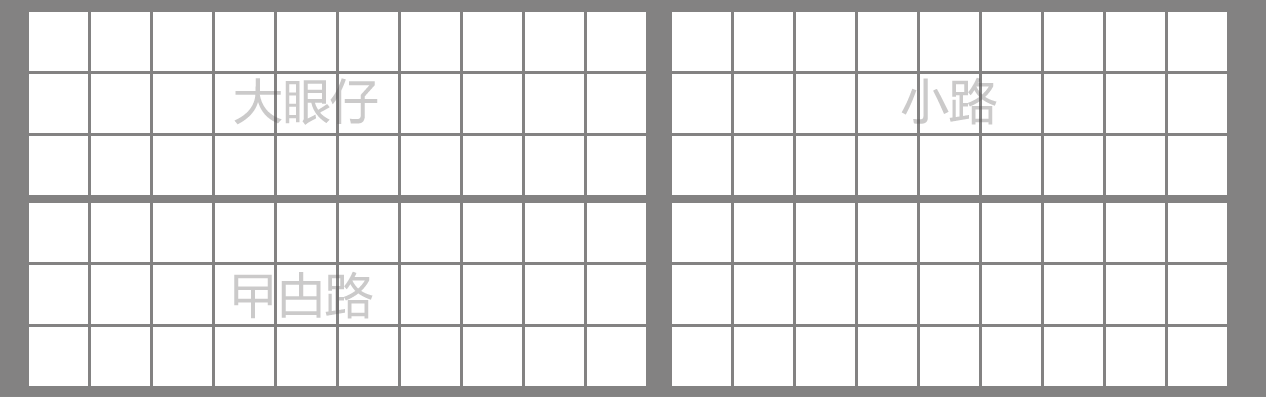
<style>
.page{position:relative;width:1266px;height:397px;background:#ffffff}
.page>*{position:absolute;margin:0}
.t1{font:48px "MicrosoftYaHei";color:#cbcaca}
</style>
<div class="page">
<p class="t1" style="left:234px;top:78px;width:144px;height:47px">大眼仔</p>
<p class="t1" style="left:901px;top:77px;width:96px;height:48px">小路</p>
<p class="t1" style="left:234px;top:271px;width:139px;height:48px">曱甴路</p>
</div>
